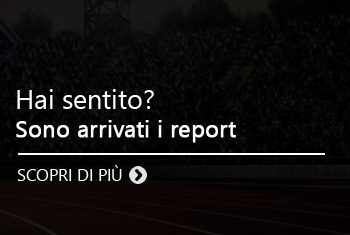
<style>
.page{position:relative;width:350px;height:235px}
.page>*{position:absolute;margin:0}
.t1{font:22.9px "SegoeUIHistoric";color:#ffffff;font-weight:bold}
.t2{font:27.1px "SegoeUIHistoric";color:#ffffff}
.t3{font:16.7px "SegoeUIHistoric";color:#ffffff}
</style>
<div class="page">
<p class="t1" style="left:16px;top:89px;width:220px;height:54px"><span class="t2"> <br>Hai sentito?<br></span>Sono arrivati i report</p>
<p class="t3" style="left:17px;top:165px;width:105px;height:16px">SCOPRI DI PIÙ</p>
</div>
